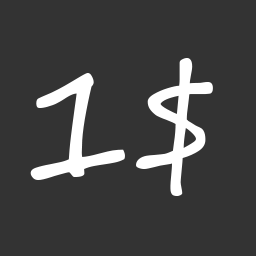
<style>
.page{position:relative;width:256px;height:256px;background:#333333}
.page>*{position:absolute;margin:0}
.t1{font:156px "SegoeScript";color:#ffffff}
</style>
<div class="page">
<p class="t1" style="left:30px;top:58px;width:183px;height:138px">1$</p>
</div>
